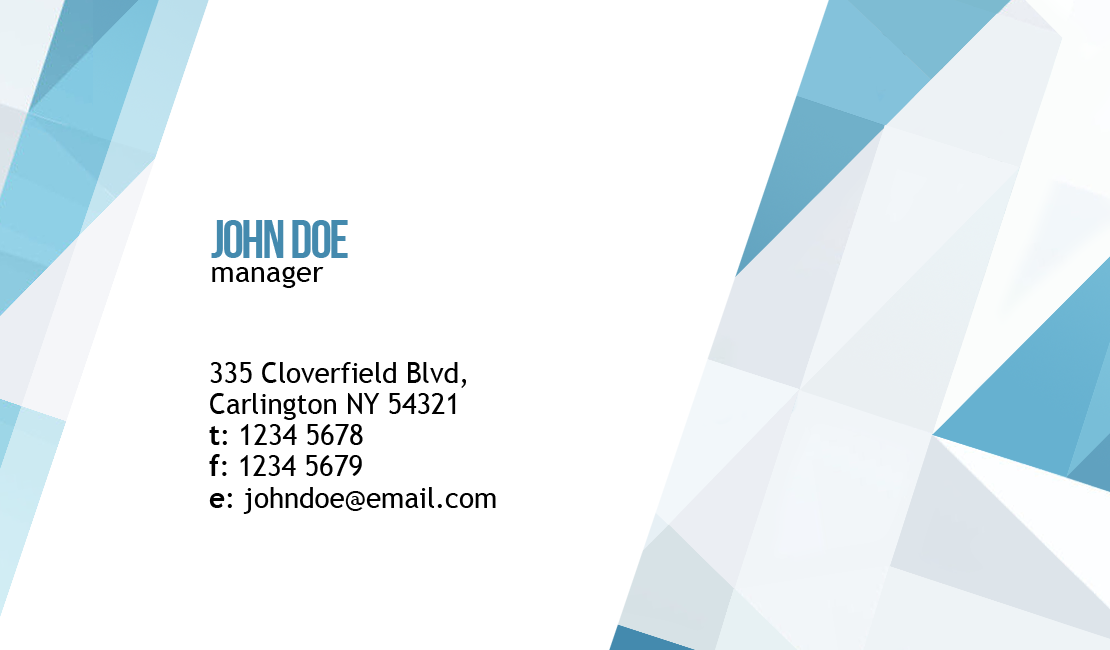
<style>
.page{position:relative;width:1110px;height:650px;background:#ffffff}
.page>*{position:absolute;margin:0}
.t1{font:54.2px "AA-BebasNeue";letter-spacing:-0.02em;color:#448aae}
.t2{font:29.2px "TrebuchetMS";color:#000000}
.t3{font:29.2px "TrebuchetMS";color:#000000;scale:0.95 1}
.t4{font:29.2px "TrebuchetMS-Bold";color:#000000;scale:0.95 1}
</style>
<div class="page">
<p class="t1" style="left:211px;top:220px;width:137px;height:38px">JOHN DOE</p>
<p class="t2" style="left:212px;top:266px;width:112px;height:22px">manager</p>
<p class="t3" style="left:210px;top:362px;width:256px;height:26px">335 Cloverfield Blvd,</p>
<p class="t3" style="left:210px;top:393px;width:246px;height:27px">Carlington NY 54321</p>
<p class="t3" style="left:209px;top:424px;width:154px;height:21px"><span class="t4">t</span>: 1234 5678</p>
<p class="t3" style="left:209px;top:454px;width:153px;height:22px"><span class="t4">f</span>: 1234 5679</p>
<p class="t3" style="left:209px;top:487px;width:287px;height:27px"><span class="t4">e</span>: johndoe@email.com</p>
</div>
